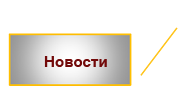
<style>
.page{position:relative;width:187px;height:106px;background:#ffffff}
.page>*{position:absolute;margin:0}
.t1{font:15.2px "Arial-BoldMT";color:#720909}
</style>
<div class="page">
<p class="t1" style="left:44px;top:56px;width:63px;height:11px">Новости</p>
</div>
